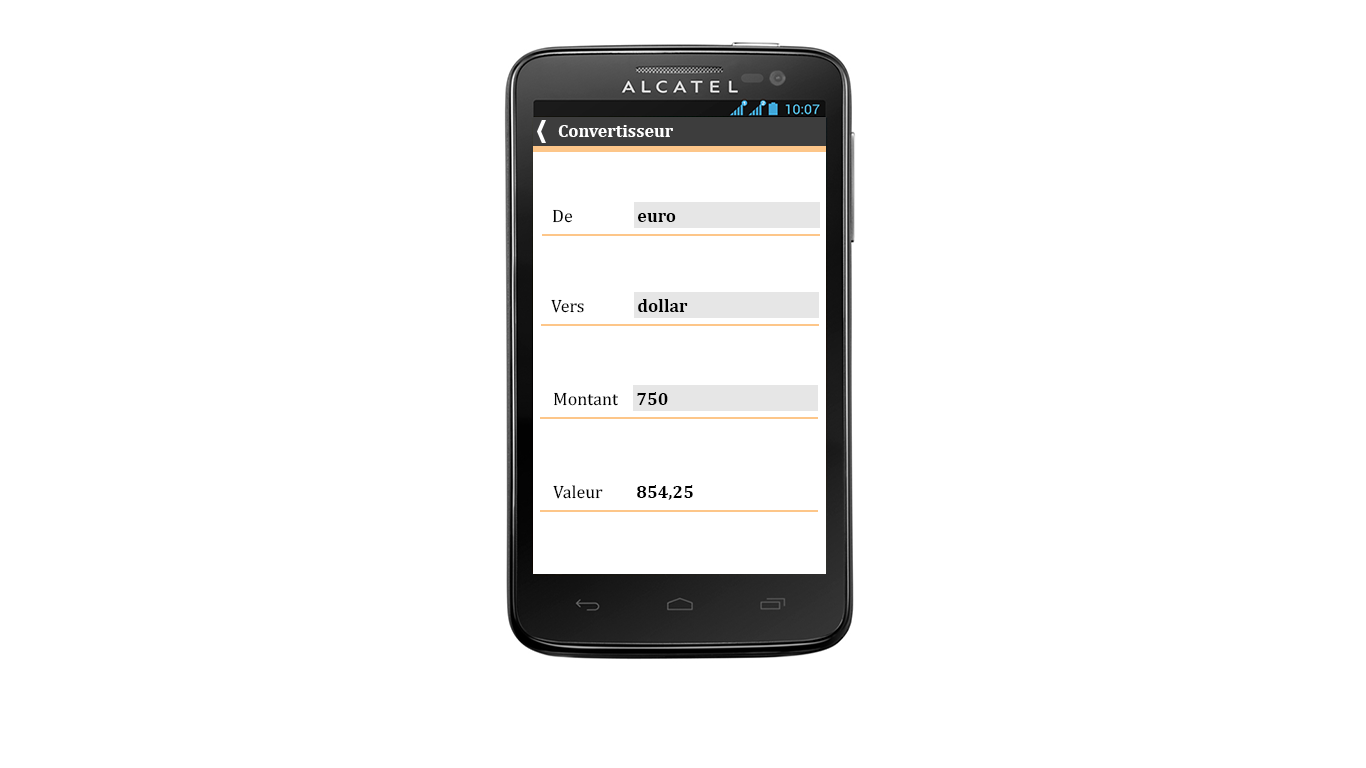
<style>
.page{position:relative;width:1366px;height:768px;background:#ffffff}
.page>*{position:absolute;margin:0}
.t1{font:18px "Cambria-Bold";color:#ffffff}
.t2{font:18px "Cambria";color:#000000}
.t3{font:18px "Cambria-Bold";color:#000000}
</style>
<div class="page">
<p class="t1" style="left:558px;top:125px;width:115px;height:12px">Convertisseur</p>
<p class="t2" style="left:553px;top:209px;width:20px;height:14px">De</p>
<p class="t3" style="left:638px;top:213px;width:38px;height:9px">euro</p>
<p class="t2" style="left:551px;top:299px;width:33px;height:14px">Vers</p>
<p class="t3" style="left:638px;top:299px;width:50px;height:13px">dollar</p>
<p class="t2" style="left:554px;top:392px;width:64px;height:14px">Montant</p>
<p class="t3" style="left:637px;top:392px;width:31px;height:13px">750</p>
<p class="t2" style="left:553px;top:485px;width:50px;height:14px">Valeur</p>
<p class="t3" style="left:637px;top:485px;width:56px;height:15px">854,25</p>
</div>
